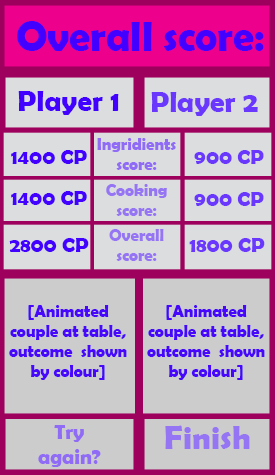
<style>
.page{position:relative;width:275px;height:475px;background:#cccccc}
.page>*{position:absolute;margin:0}
.t1{font:41.7px "BerlinSansFBDemi-Bold";color:#4200ff}
.t2{font:29.2px "BerlinSansFBDemi-Bold";color:#4200ff}
.t3{font:29.2px "BerlinSansFBDemi-Bold";color:#6a37fd}
.t4{font:20.8px "BerlinSansFBDemi-Bold";color:#4200ff}
.t5{font:16.7px "BerlinSansFBDemi-Bold";color:#906cf6}
.t6{font:20.8px "BerlinSansFBDemi-Bold";color:#6a37fd}
.t7{font:16.7px "BerlinSansFBDemi-Bold";color:#9675f4}
.t8{font:16.7px "BerlinSansFBDemi-Bold";color:#4607fa}
.t9{font:20.8px "BerlinSansFBDemi-Bold";color:#906cf6}
.t10{font:33.3px "BerlinSansFBDemi-Bold";color:#9675f4}
</style>
<div class="page">
<p class="t1" style="left:17px;top:21px;width:247px;height:30px">Overall score:</p>
<p class="t2" style="left:18px;top:91px;width:101px;height:24px">Player 1</p>
<p class="t3" style="left:151px;top:92px;width:107px;height:24px">Player 2</p>
<p class="t4" style="left:11px;top:150px;width:76px;height:14px">1400 CP</p>
<p class="t5" style="left:97px;top:138px;width:79px;height:32px;text-align:center">Ingridients score:</p>
<p class="t6" style="left:194px;top:150px;width:70px;height:14px">900 CP</p>
<p class="t7" style="left:106px;top:184px;width:61px;height:32px;text-align:center">Cooking score:</p>
<p class="t4" style="left:11px;top:191px;width:76px;height:14px">1400 CP</p>
<p class="t6" style="left:194px;top:192px;width:70px;height:14px">900 CP</p>
<p class="t7" style="left:109px;top:229px;width:55px;height:32px;text-align:center">Overall score:</p>
<p class="t4" style="left:9px;top:238px;width:80px;height:14px">2800 CP</p>
<p class="t6" style="left:189px;top:238px;width:76px;height:14px">1800 CP</p>
<p class="t8" style="left:9px;top:305px;width:118px;height:75px;text-align:center">[Animated couple at table, outcome  shown by colour]</p>
<p class="t8" style="left:147px;top:305px;width:118px;height:75px;text-align:center">[Animated couple at table, outcome  shown by colour]</p>
<p class="t9" style="left:38px;top:425px;width:63px;height:42px;text-align:center">Try again?</p>
<p class="t10" style="left:165px;top:425px;width:85px;height:24px">Finish</p>
</div>
